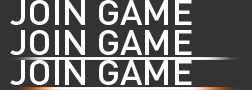
<style>
.page{position:relative;width:252px;height:90px;background:#333333}
.page>*{position:absolute;margin:0}
.t1{font:35.2px "DINPro-Medium";color:#ffffff}
</style>
<div class="page">
<p class="t1" style="left:10px;top:0px;width:182px;height:25px">JOIN GAME</p>
<p class="t1" style="left:10px;top:30px;width:182px;height:25px">JOIN GAME</p>
<p class="t1" style="left:10px;top:60px;width:182px;height:25px">JOIN GAME</p>
</div>
